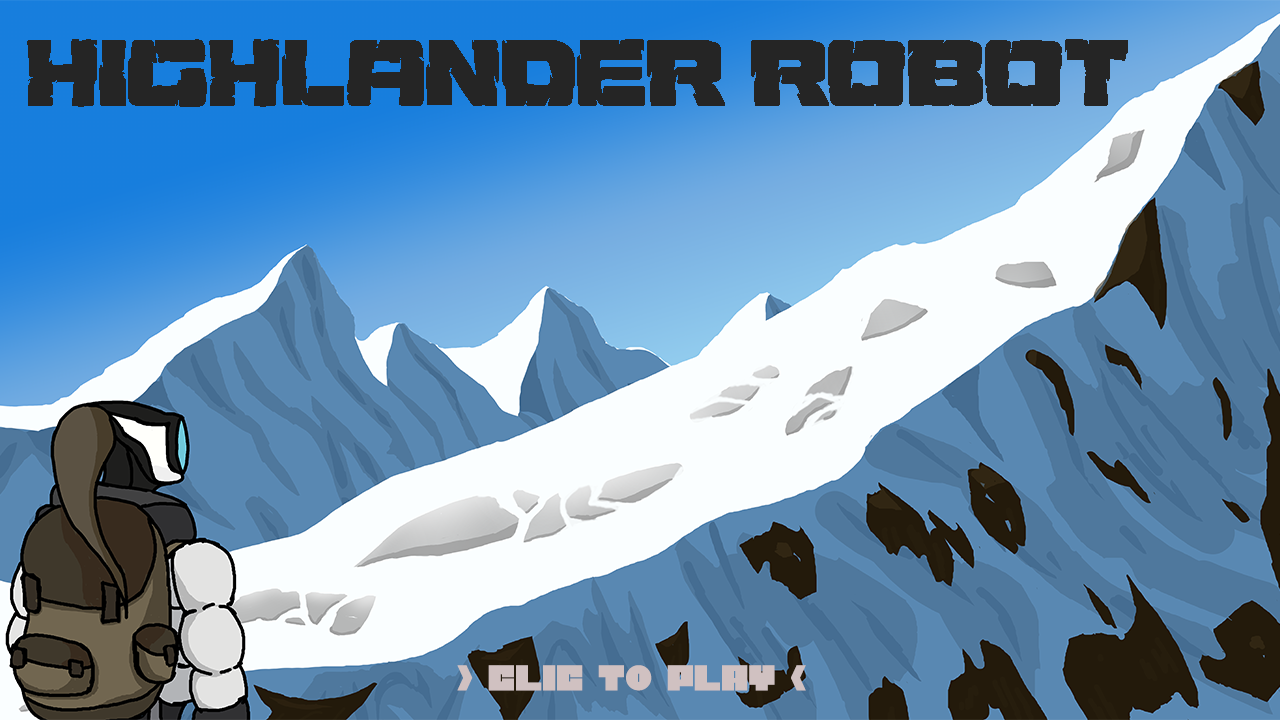
<style>
.page{position:relative;width:1280px;height:720px}
.page>*{position:absolute;margin:0}
.t1{font:95.5px "OreCrusher";color:#252525}
.t2{font:35.8px "ThicxerRegular";color:#d0c1c1}
</style>
<div class="page">
<p class="t1" style="left:27px;top:39px;width:1101px;height:68px">HIGHLANDER ROBOT</p>
<p class="t2" style="left:457px;top:665px;width:349px;height:26px">&gt; CLIC TO PLAY &lt;</p>
</div>
